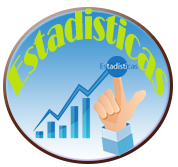
<style>
.page{position:relative;width:178px;height:167px;background:#ffffff}
.page>*{position:absolute;margin:0}
.t1{font:42.5px "Broadway";color:#bce20d;scale:0.5 1}
</style>
<div class="page">
<p class="t1" style="left:7px;top:8px;width:160px;height:89px">Estadisticas</p>
</div>
